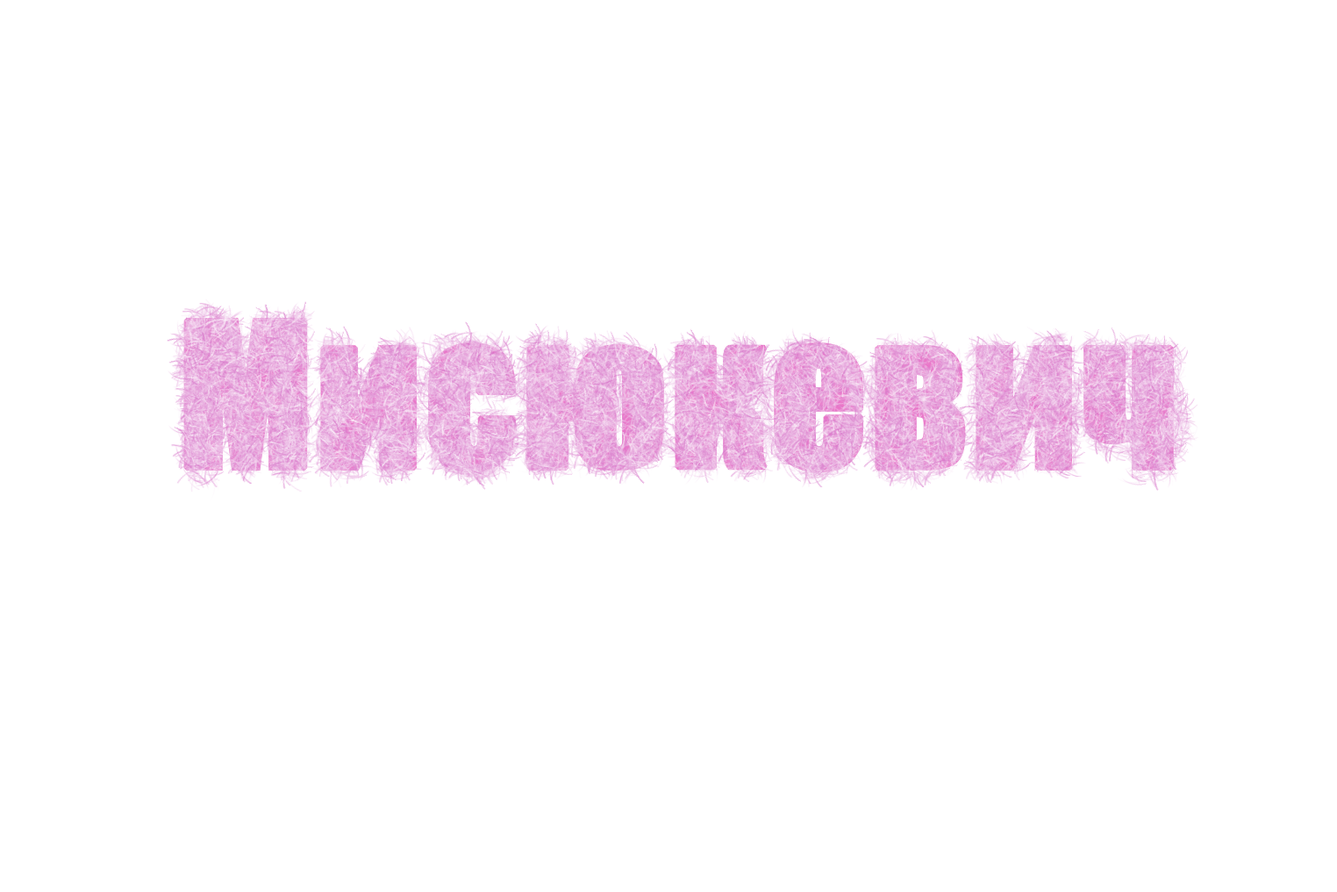
<style>
.page{position:relative;width:1337px;height:892px;background:#ffffff}
.page>*{position:absolute;margin:0}
.t1{font:185.8px "Impact";color:#e9afe0;font-weight:bold}
</style>
<div class="page">
<p class="t1" style="left:183px;top:318px;width:991px;height:154px">Мисюкевич</p>
</div>
